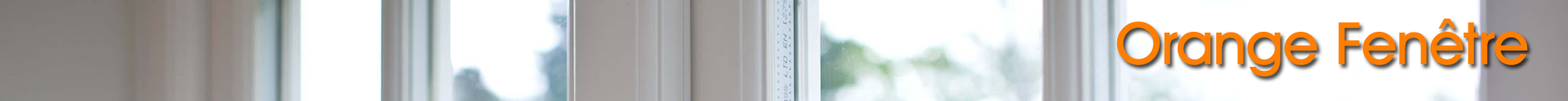
<style>
.page{position:relative;width:1568px;height:101px;background:#ffffff}
.page>*{position:absolute;margin:0}
.t1{font:58.8px "AvantGardeITCbyBT-Medium";color:#ff7e00}
</style>
<div class="page">
<p class="t1" style="left:1116px;top:18px;width:412px;height:59px">Orange Fenêtre</p>
</div>
